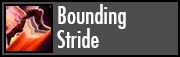
<style>
.page{position:relative;width:180px;height:57px;background:#4c4c4c}
.page>*{position:absolute;margin:0}
.t1{font:24px/24px "FuturaCondensed";color:#ffffff}
</style>
<div class="page">
<p class="t1" style="left:57px;top:4px;width:69px;height:44px;text-align:right">Bounding<br>Stride</p>
</div>
